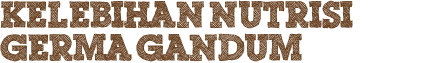
<style>
.page{position:relative;width:421px;height:63px;background:#ffffff}
.page>*{position:absolute;margin:0}
.t1{font:36px/33px "ScribbleBoxDEMO";color:#684121}
</style>
<div class="page">
<p class="t1" style="left:0px;top:0px;width:353px;height:62px">Kelebihan nutrisi <br>Germa Gandum</p>
</div>
